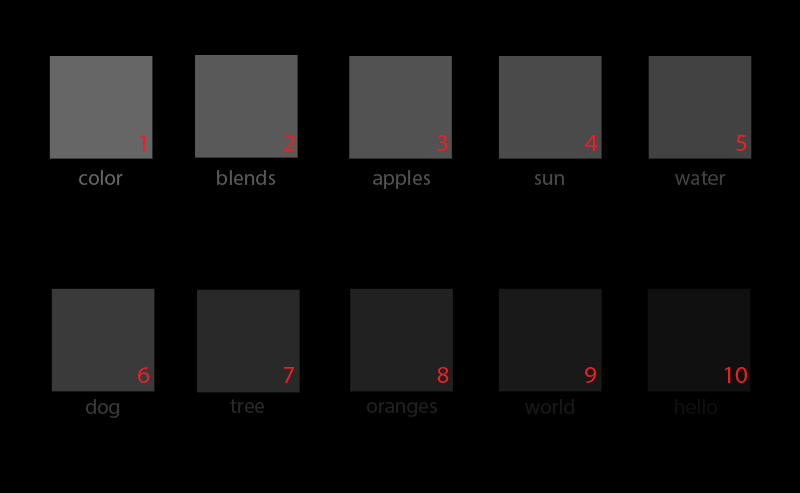
<style>
.page{position:relative;width:800px;height:493px;background:#000000}
.page>*{position:absolute;margin:0}
.t1{font:24.6px "MyriadPro-Regular";color:#ed1e24}
.t2{font:24.6px "MyriadPro-Regular";color:#ed2024}
.t3{font:21.1px "MyriadPro-Regular";color:#666666}
.t4{font:21.1px "MyriadPro-Regular";color:#595959}
.t5{font:21.1px "MyriadPro-Regular";color:#525252}
.t6{font:21.1px "MyriadPro-Regular";color:#4a4a4a}
.t7{font:21.1px "MyriadPro-Regular";color:#424242}
.t8{font:21.1px "MyriadPro-Regular";color:#3a3a3a}
.t9{font:21.1px "MyriadPro-Regular";color:#292929}
</style>
<div class="page">
<p class="t1" style="left:139px;top:135px;width:7px;height:16px">1</p>
<p class="t1" style="left:284px;top:135px;width:11px;height:16px">2</p>
<p class="t1" style="left:437px;top:135px;width:11px;height:16px">3</p>
<p class="t1" style="left:585px;top:135px;width:13px;height:16px">4</p>
<p class="t2" style="left:736px;top:135px;width:11px;height:16px">5</p>
<p class="t3" style="left:79px;top:170px;width:44px;height:15px">color</p>
<p class="t4" style="left:217px;top:170px;width:58px;height:15px">blends</p>
<p class="t5" style="left:373px;top:170px;width:57px;height:19px">apples</p>
<p class="t6" style="left:534px;top:174px;width:30px;height:11px">sun</p>
<p class="t7" style="left:675px;top:171px;width:51px;height:14px">water</p>
<p class="t1" style="left:138px;top:367px;width:12px;height:16px">6</p>
<p class="t1" style="left:284px;top:367px;width:10px;height:16px">7</p>
<p class="t1" style="left:437px;top:367px;width:12px;height:16px">8</p>
<p class="t1" style="left:585px;top:367px;width:11px;height:16px">9</p>
<p class="t1" style="left:724px;top:367px;width:23px;height:16px">10</p>
<p class="t8" style="left:85px;top:399px;width:35px;height:19px">dog</p>
<p class="t9" style="left:230px;top:399px;width:34px;height:14px">tree</p>
</div>
